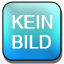
<style>
.page{position:relative;width:64px;height:64px}
.page>*{position:absolute;margin:0}
.t1{font:16.7px "Mangal";color:#ffffff;text-transform:uppercase;font-weight:bold}
</style>
<div class="page">
<p class="t1" style="left:12px;top:15px;width:41px;height:34px">Kein<br>Bild</p>
</div>
